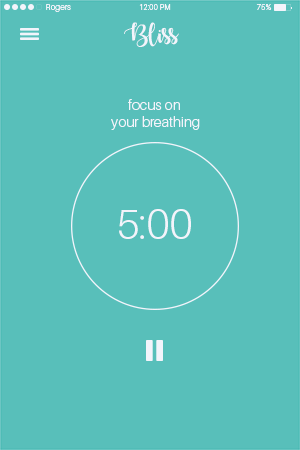
<style>
.page{position:relative;width:300px;height:450px;background:#58bfba}
.page>*{position:absolute;margin:0}
.t1{font:8.3px "Aileron-Light";color:#f3f4fb}
.t2{font:7.8px "Aileron-Light";color:#f3f4fb}
.t3{font:7.9px "Aileron-Light";color:#f3f4fb}
.t4{font:18.9px "AutumninNovember";color:#f3f4fb}
.t5{font:14.1px "Aileron-Light";color:#f3f4fb}
.t6{font:40.2px "Aileron-Light";color:#f3f4fb}
</style>
<div class="page">
<p class="t1" style="left:46px;top:4px;width:25px;height:8px">Rogers</p>
<p class="t2" style="left:139px;top:4px;width:32px;height:6px">12:00 PM</p>
<p class="t3" style="left:256px;top:4px;width:16px;height:6px">75%</p>
<p class="t4" style="left:124px;top:22px;width:55px;height:25px">Bliss</p>
<p class="t5" style="left:111px;top:99px;width:89px;height:31px;text-align:center">focus on <br>your breathing</p>
<p class="t6" style="left:119px;top:209px;width:72px;height:30px">5:00</p>
</div>
